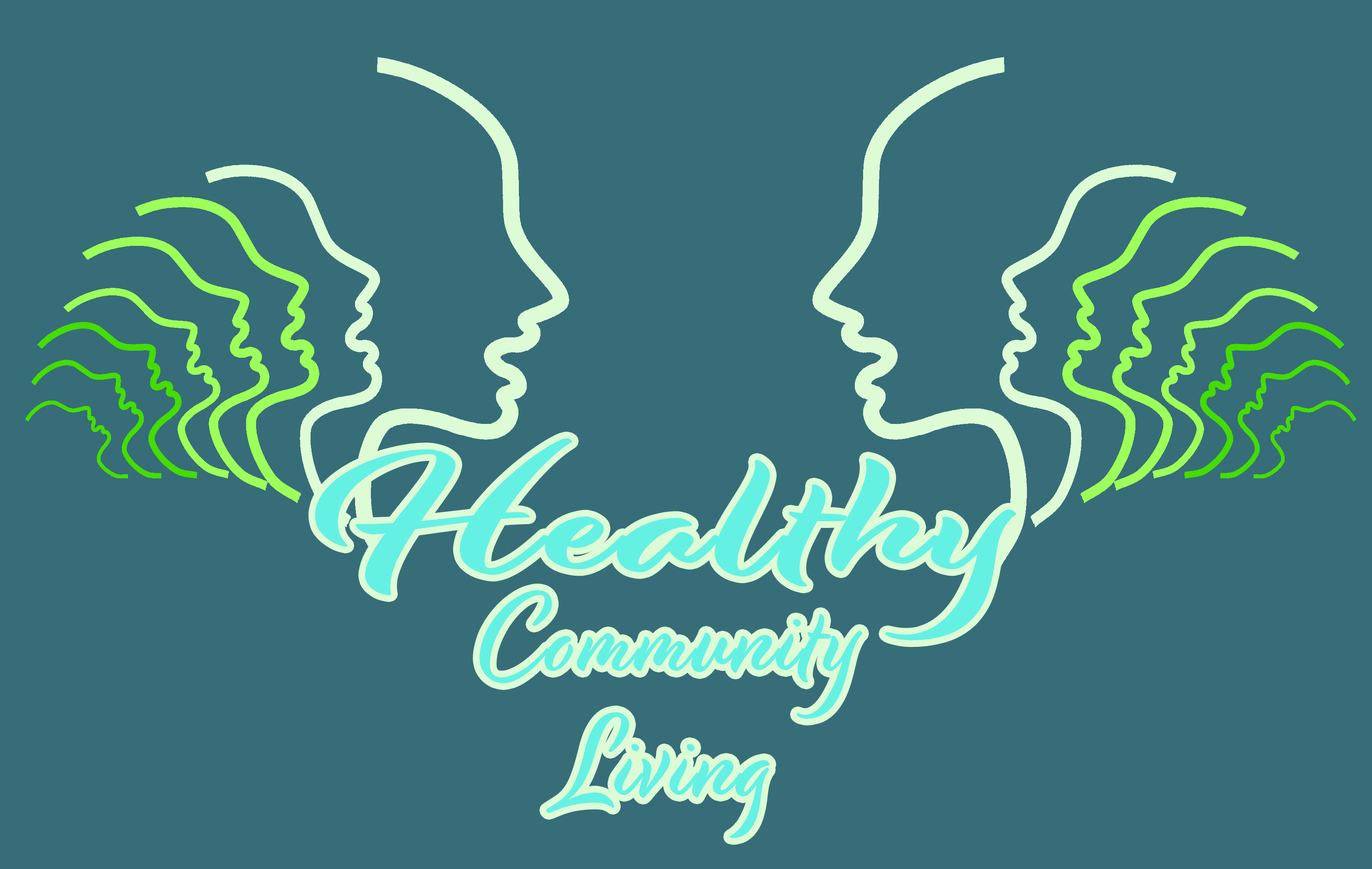
<style>
.page{position:relative;width:1372px;height:869px;background:#366d78}
.page>*{position:absolute;margin:0}
.t1{font:159.1px "Modish-Regular";letter-spacing:0.025em;color:#64f1e3;scale:1.59 1}
.t2{font:104px "Modish-Regular";letter-spacing:0.025em;color:#64f1e3}
</style>
<div class="page">
<p class="t1" style="left:315px;top:438px;width:702px;height:202px">Healthy</p>
<p class="t2" style="left:480px;top:590px;width:383px;height:248px;text-align:center">Community<br>Living</p>
</div>
